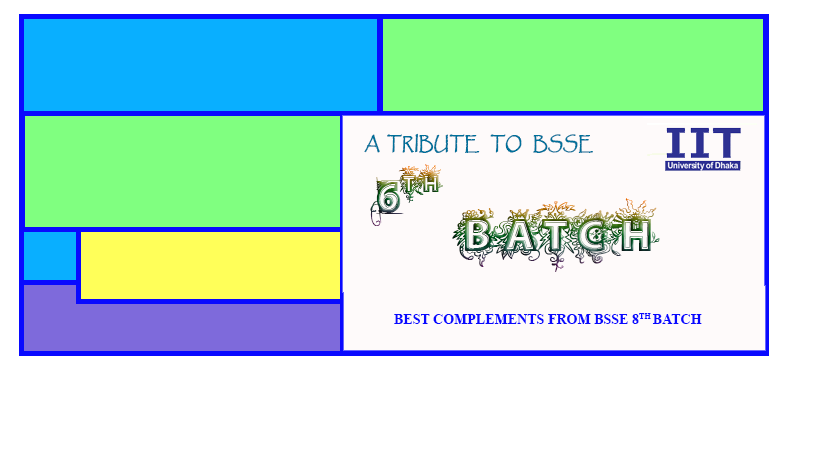
<style>
.page{position:relative;width:819px;height:460px;background:#ffffff}
.page>*{position:absolute;margin:0}
.t1{font:18.3px "Papyrus-Regular";color:#00709a;font-weight:bold;scale:0.82 1}
.t2{font:72px "vtksDejaVu"}
.t3{font:78.6px "vtksDejaVu";scale:1.04 1}
.t4{font:14px "TimesNewRomanPS-BoldMT";color:#0909ff}
</style>
<div class="page">
<p class="t1" style="left:364px;top:133px;width:229px;height:20px">A  TRIBUTE   TO   BSSE</p>
<p class="t1" style="left:364px;top:133px;width:229px;height:20px">A  TRIBUTE   TO   BSSE</p>
<p class="t2" style="left:370px;top:164px;width:73px;height:62px">6TH</p>
<p class="t2" style="left:370px;top:164px;width:73px;height:62px">6TH</p>
<p class="t3" style="left:452px;top:198px;width:208px;height:74px">BATCH</p>
<p class="t3" style="left:452px;top:198px;width:208px;height:74px">BATCH</p>
<p class="t4" style="left:394px;top:313px;width:308px;height:11px">BEST COMPLEMENTS FROM BSSE 8TH BATCH</p>
<p class="t4" style="left:394px;top:313px;width:308px;height:11px">BEST COMPLEMENTS FROM BSSE 8TH BATCH</p>
</div>
